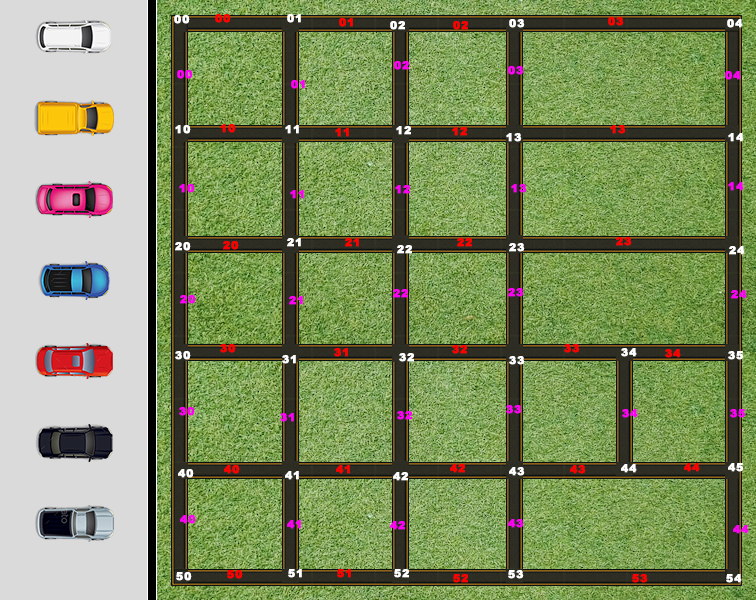
<style>
.page{position:relative;width:756px;height:600px}
.page>*{position:absolute;margin:0}
.t1{font:10.7px "Arial-Black";letter-spacing:0.075em;color:#ffffff;font-weight:bold}
.t2{font:10.7px "Arial-Black";letter-spacing:0.075em;color:#ff0000;font-weight:bold}
.t3{font:10.7px "Arial-Black";letter-spacing:0.075em;color:#ff00f6;font-weight:bold}
</style>
<div class="page">
<p class="t1" style="left:174px;top:15px;width:16px;height:9px">00</p>
<p class="t2" style="left:215px;top:14px;width:16px;height:9px">00</p>
<p class="t1" style="left:287px;top:14px;width:14px;height:9px">01</p>
<p class="t2" style="left:608px;top:17px;width:16px;height:9px">03</p>
<p class="t2" style="left:339px;top:18px;width:14px;height:9px">01</p>
<p class="t1" style="left:390px;top:21px;width:15px;height:9px">02</p>
<p class="t2" style="left:453px;top:21px;width:15px;height:9px">02</p>
<p class="t1" style="left:509px;top:19px;width:16px;height:9px">03</p>
<p class="t1" style="left:727px;top:19px;width:16px;height:9px">04</p>
<p class="t3" style="left:394px;top:61px;width:15px;height:9px">02</p>
<p class="t3" style="left:177px;top:70px;width:16px;height:9px">00</p>
<p class="t3" style="left:508px;top:66px;width:16px;height:9px">03</p>
<p class="t3" style="left:725px;top:71px;width:16px;height:9px">04</p>
<p class="t3" style="left:291px;top:80px;width:14px;height:9px">01</p>
<p class="t1" style="left:175px;top:125px;width:16px;height:9px">10</p>
<p class="t2" style="left:220px;top:124px;width:16px;height:9px">10</p>
<p class="t1" style="left:285px;top:125px;width:14px;height:9px">11</p>
<p class="t1" style="left:396px;top:126px;width:15px;height:9px">12</p>
<p class="t2" style="left:610px;top:125px;width:16px;height:9px">13</p>
<p class="t2" style="left:335px;top:128px;width:14px;height:9px">11</p>
<p class="t2" style="left:452px;top:127px;width:15px;height:9px">12</p>
<p class="t1" style="left:506px;top:133px;width:16px;height:9px">13</p>
<p class="t1" style="left:728px;top:133px;width:16px;height:9px">14</p>
<p class="t3" style="left:179px;top:184px;width:16px;height:9px">10</p>
<p class="t3" style="left:395px;top:185px;width:15px;height:9px">12</p>
<p class="t3" style="left:511px;top:184px;width:16px;height:9px">13</p>
<p class="t3" style="left:728px;top:182px;width:16px;height:9px">14</p>
<p class="t3" style="left:290px;top:190px;width:14px;height:9px">11</p>
<p class="t1" style="left:175px;top:242px;width:16px;height:9px">20</p>
<p class="t2" style="left:223px;top:241px;width:16px;height:9px">20</p>
<p class="t1" style="left:287px;top:238px;width:14px;height:9px">21</p>
<p class="t2" style="left:345px;top:238px;width:14px;height:9px">21</p>
<p class="t1" style="left:397px;top:245px;width:15px;height:9px">22</p>
<p class="t2" style="left:457px;top:238px;width:15px;height:9px">22</p>
<p class="t1" style="left:509px;top:243px;width:16px;height:9px">23</p>
<p class="t2" style="left:616px;top:237px;width:16px;height:9px">23</p>
<p class="t1" style="left:729px;top:246px;width:16px;height:9px">24</p>
<p class="t3" style="left:393px;top:289px;width:15px;height:9px">22</p>
<p class="t3" style="left:508px;top:288px;width:16px;height:9px">23</p>
<p class="t3" style="left:731px;top:290px;width:16px;height:9px">24</p>
<p class="t3" style="left:180px;top:295px;width:16px;height:9px">20</p>
<p class="t3" style="left:289px;top:296px;width:14px;height:9px">21</p>
<p class="t1" style="left:175px;top:351px;width:16px;height:9px">30</p>
<p class="t2" style="left:220px;top:344px;width:16px;height:9px">30</p>
<p class="t2" style="left:334px;top:348px;width:14px;height:9px">31</p>
<p class="t1" style="left:399px;top:353px;width:15px;height:9px">32</p>
<p class="t2" style="left:452px;top:345px;width:15px;height:9px">32</p>
<p class="t2" style="left:564px;top:344px;width:16px;height:9px">33</p>
<p class="t1" style="left:621px;top:348px;width:16px;height:9px">34</p>
<p class="t2" style="left:665px;top:349px;width:16px;height:9px">34</p>
<p class="t1" style="left:728px;top:351px;width:16px;height:9px">35</p>
<p class="t1" style="left:282px;top:355px;width:14px;height:9px">31</p>
<p class="t1" style="left:509px;top:356px;width:16px;height:9px">33</p>
<p class="t3" style="left:179px;top:407px;width:16px;height:9px">30</p>
<p class="t3" style="left:280px;top:413px;width:14px;height:9px">31</p>
<p class="t3" style="left:397px;top:411px;width:15px;height:9px">32</p>
<p class="t3" style="left:506px;top:405px;width:16px;height:9px">33</p>
<p class="t3" style="left:622px;top:409px;width:16px;height:9px">34</p>
<p class="t3" style="left:730px;top:409px;width:16px;height:9px">35</p>
<p class="t1" style="left:178px;top:469px;width:16px;height:9px">40</p>
<p class="t2" style="left:224px;top:465px;width:16px;height:9px">40</p>
<p class="t1" style="left:285px;top:471px;width:14px;height:9px">41</p>
<p class="t2" style="left:336px;top:465px;width:14px;height:9px">41</p>
<p class="t1" style="left:393px;top:472px;width:15px;height:9px">42</p>
<p class="t2" style="left:450px;top:464px;width:15px;height:9px">42</p>
<p class="t1" style="left:509px;top:467px;width:16px;height:9px">43</p>
<p class="t2" style="left:570px;top:465px;width:16px;height:9px">43</p>
<p class="t1" style="left:621px;top:464px;width:16px;height:9px">44</p>
<p class="t2" style="left:684px;top:463px;width:16px;height:9px">44</p>
<p class="t1" style="left:728px;top:463px;width:16px;height:9px">45</p>
<p class="t3" style="left:180px;top:515px;width:16px;height:9px">40</p>
<p class="t3" style="left:287px;top:520px;width:14px;height:9px">41</p>
<p class="t3" style="left:390px;top:521px;width:15px;height:9px">42</p>
<p class="t3" style="left:508px;top:519px;width:16px;height:9px">43</p>
<p class="t3" style="left:733px;top:525px;width:16px;height:9px">44</p>
<p class="t1" style="left:288px;top:569px;width:14px;height:9px">51</p>
<p class="t2" style="left:337px;top:569px;width:14px;height:9px">51</p>
<p class="t1" style="left:394px;top:569px;width:15px;height:9px">52</p>
<p class="t1" style="left:176px;top:572px;width:16px;height:9px">50</p>
<p class="t2" style="left:227px;top:570px;width:16px;height:9px">50</p>
<p class="t2" style="left:453px;top:574px;width:15px;height:9px">52</p>
<p class="t1" style="left:508px;top:570px;width:16px;height:9px">53</p>
<p class="t2" style="left:632px;top:574px;width:16px;height:9px">53</p>
<p class="t1" style="left:726px;top:574px;width:16px;height:9px">54</p>
</div>
